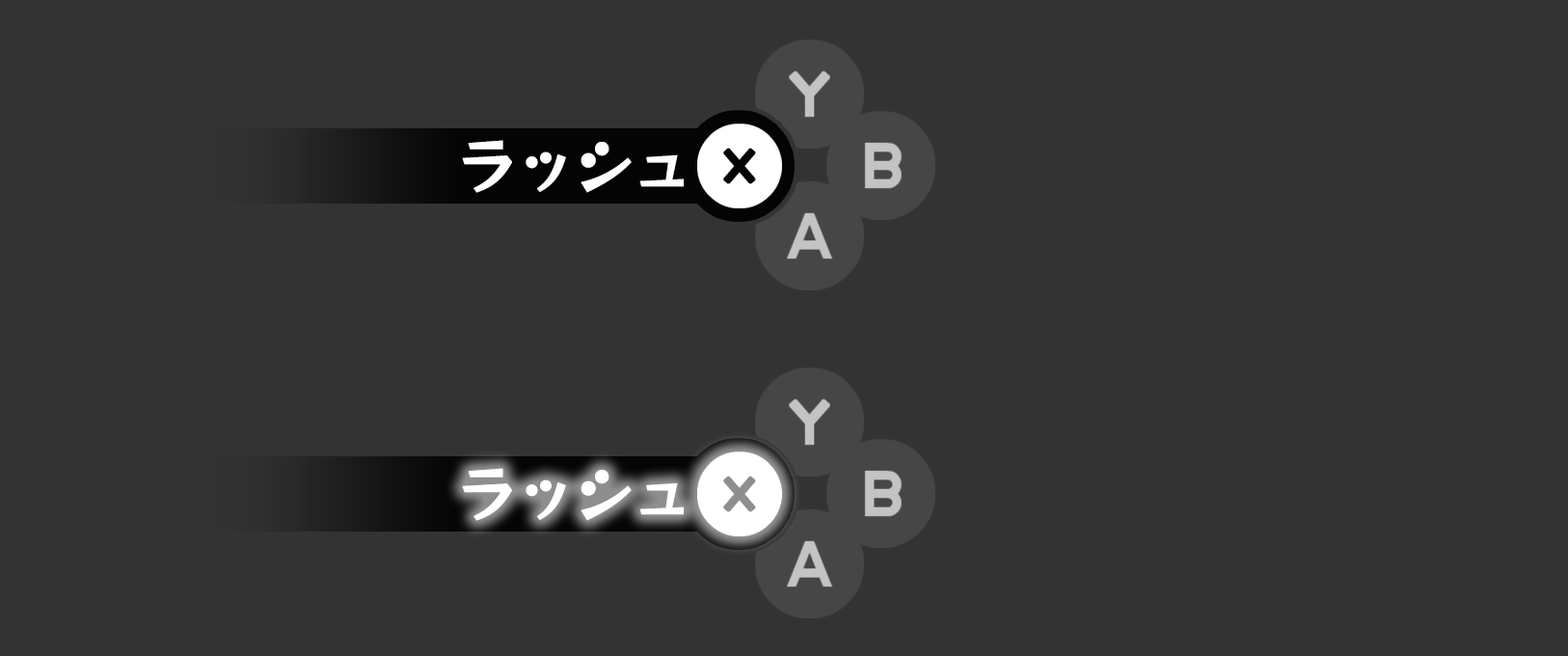
<style>
.page{position:relative;width:1568px;height:656px;background:#333333}
.page>*{position:absolute;margin:0}
.t1{font:60.3px "RocknRollOne-Regular";letter-spacing:-0.06em;color:#ffffff;font-weight:bold}
</style>
<div class="page">
<p class="t1" style="left:462px;top:140px;width:222px;height:53px">ラッシュ</p>
<p class="t1" style="left:462px;top:468px;width:222px;height:53px">ラッシュ</p>
</div>
